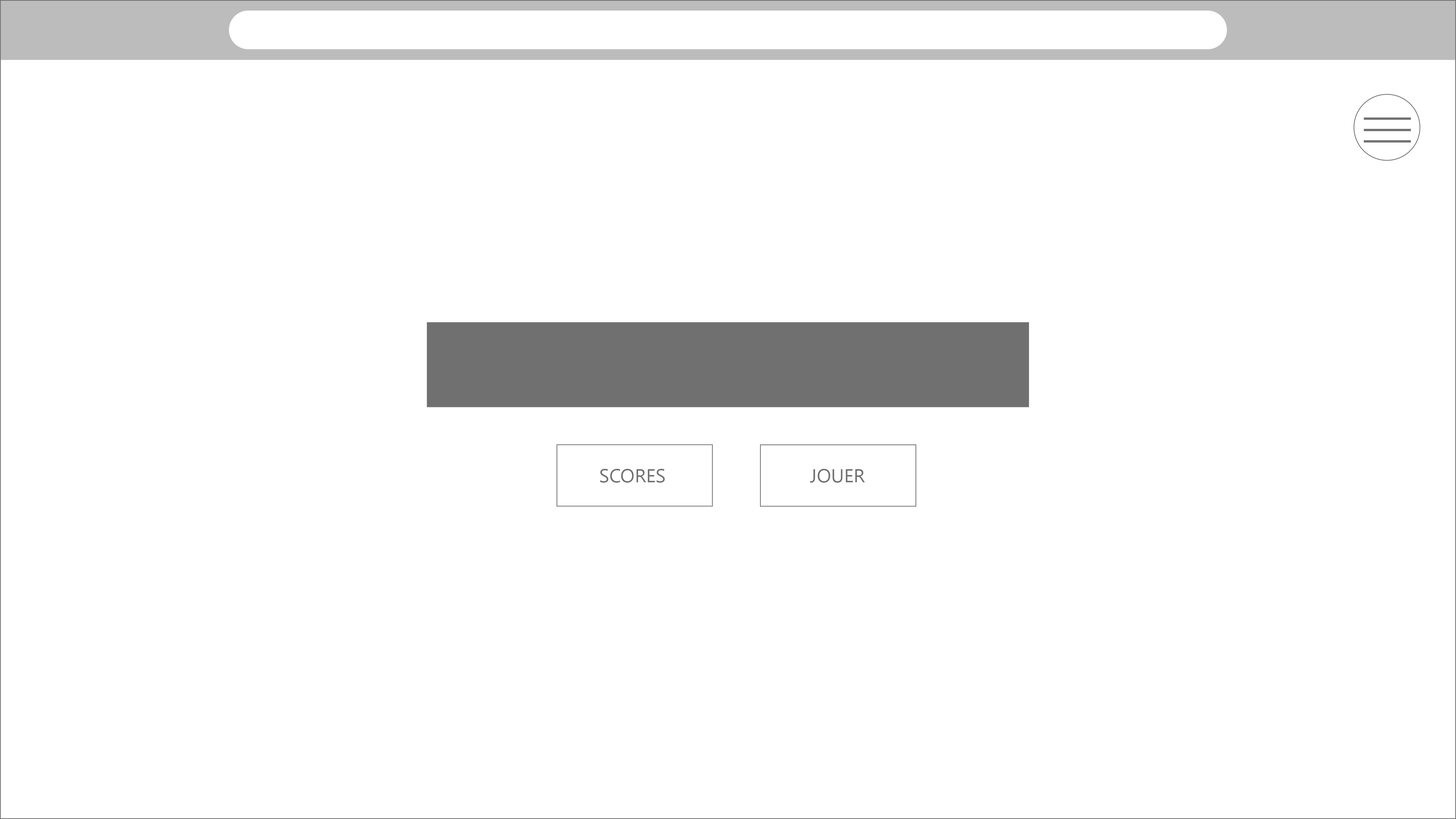
<style>
.page{position:relative;width:1456px;height:819px;background:#ffffff}
.page>*{position:absolute;margin:0}
.t1{font:19px "SegoeUI";color:#707070}
</style>
<div class="page">
<p class="t1" style="left:600px;top:469px;width:20px;height:14px">SC</p>
<p class="t1" style="left:621px;top:469px;width:44px;height:14px">ORES</p>
<p class="t1" style="left:810px;top:469px;width:55px;height:14px">JOUER</p>
</div>
